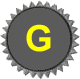
<style>
.page{position:relative;width:80px;height:79px;background:#ffffff}
.page>*{position:absolute;margin:0}
.t1{font:35.9px "Arial-BoldMT";color:#ffff00}
</style>
<div class="page">
<p class="t1" style="left:26px;top:24px;width:25px;height:28px">G</p>
</div>
